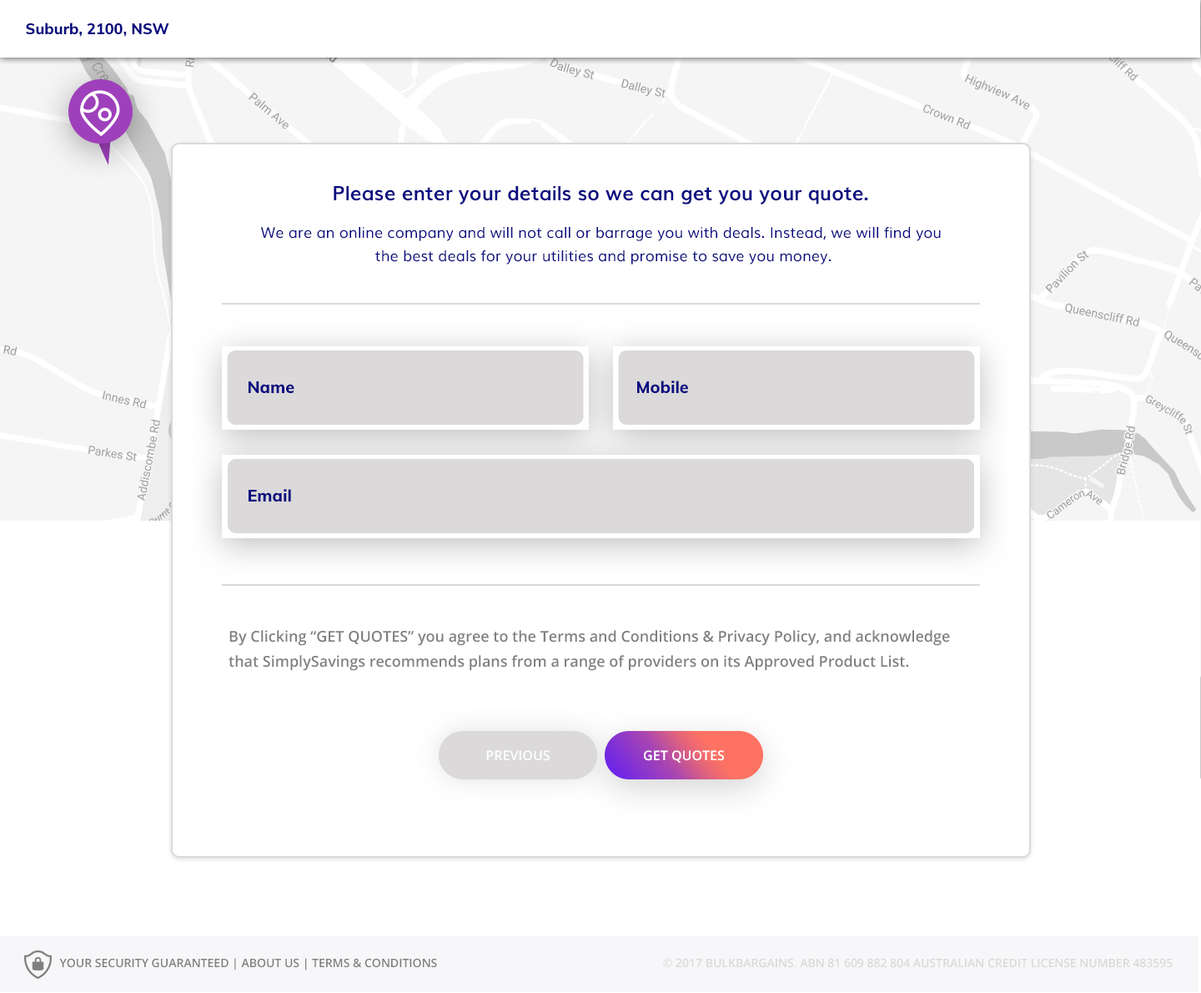
<style>
.page{position:relative;width:1201px;height:993px;background:#ffffff}
.page>*{position:absolute;margin:0}
.t1{font:15px "Muli-ExtraBold";color:#0a0d80}
.t2{font:20px "Muli-Bold";color:#0a0d80}
.t3{font:15px "Muli";color:#0a0d80}
.t4{font:16.6px "Muli-ExtraBold";color:#0a0d80}
.t5{font:15px/20px "OpenSans-Semibold";color:#807f7f}
.t6{font:13.4px "OpenSans-Semibold";color:#ffffff;text-transform:uppercase}
.t7{font:11.7px "OpenSans-Semibold";color:#807f7f;text-transform:uppercase}
.t8{font:11.7px "OpenSans-Semibold";color:#dbd9d9;text-transform:uppercase}
</style>
<div class="page">
<p class="t1" style="left:26px;top:23px;width:143px;height:14px">Suburb, 2100, NSW</p>
<p class="t2" style="left:334px;top:186px;width:534px;height:19px">Please enter your details so we can get you your quote.</p>
<p class="t3" style="left:260px;top:227px;width:681px;height:37px;text-align:center">We are an online company and will not call or barrage you with deals. Instead, we will find you <br>the best deals for your utilities and promise to save you money.</p>
<p class="t4" style="left:249px;top:381px;width:45px;height:13px">Name</p>
<p class="t4" style="left:637px;top:380px;width:51px;height:14px">Mobile</p>
<p class="t4" style="left:249px;top:489px;width:42px;height:13px">Email</p>
<p class="t5" style="left:229px;top:630px;width:721px;height:41px">By Clicking “GET QUOTES” you agree to the Terms and Conditions &amp; Privacy Policy, and acknowledge <br>that SimplySavings recommends plans from a range of providers on its Approved Product List.</p>
<p class="t6" style="left:486px;top:750px;width:64px;height:11px">Previous</p>
<p class="t6" style="left:644px;top:750px;width:80px;height:12px">Get quotes</p>
<p class="t7" style="left:59px;top:958px;width:378px;height:12px">Your security guaranteed | about us | Terms &amp; Conditions</p>
<p class="t8" style="left:663px;top:958px;width:510px;height:10px">© 2017 Bulkbargains. ABN 81 609 882 804 Australian Credit License Number 483595</p>
</div>
